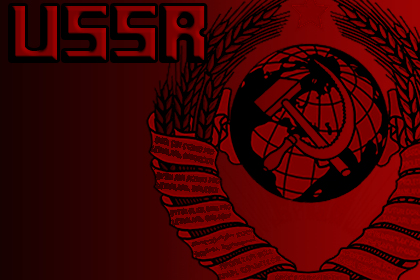
<style>
.page{position:relative;width:420px;height:280px}
.page>*{position:absolute;margin:0}
.t1{font:48px "DSProgress-SemiBold";letter-spacing:0.1em}
</style>
<div class="page">
<p class="t1" style="left:11px;top:6px;width:194px;height:54px">ussr</p>
</div>
